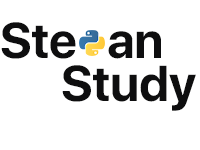
<style>
.page{position:relative;width:200px;height:150px;background:#ffffff}
.page>*{position:absolute;margin:0}
.t1{font:50px "SFProDisplay-Bold";color:#0e0e0f}
</style>
<div class="page">
<p class="t1" style="left:1px;top:22px;width:75px;height:37px">Ste</p>
<p class="t1" style="left:108px;top:31px;width:53px;height:28px">an</p>
<p class="t1" style="left:62px;top:65px;width:134px;height:46px">Study</p>
</div>
